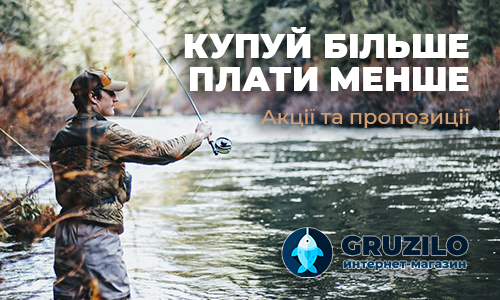
<style>
.page{position:relative;width:500px;height:300px}
.page>*{position:absolute;margin:0}
.t1{font:33.3px/33.3px "Montserrat-Black";color:#ffffff}
.t2{font:20.8px "Montserrat-Medium";color:#d39f72}
</style>
<div class="page">
<p class="t1" style="left:184px;top:27px;width:285px;height:65px;text-align:right">КУПУЙ БІЛЬШЕ<br>ПЛАТИ МЕНШЕ</p>
<p class="t2" style="left:261px;top:109px;width:209px;height:19px">Акції та пропозиції</p>
</div>
